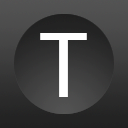
<style>
.page{position:relative;width:128px;height:128px}
.page>*{position:absolute;margin:0}
.t1{font:100px "Consolas";color:#ffffff}
</style>
<div class="page">
<p class="t1" style="left:40px;top:33px;width:47px;height:64px">T</p>
</div>
